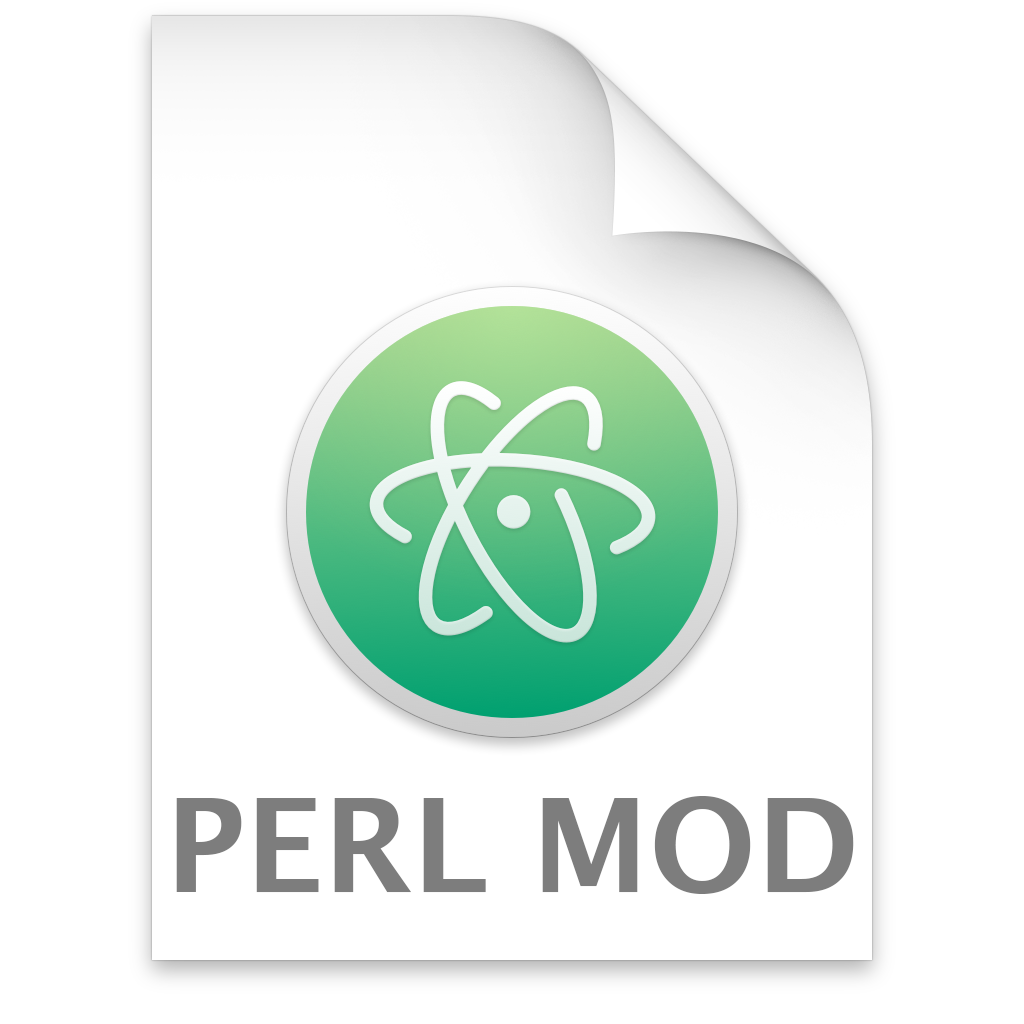
<style>
.page{position:relative;width:1024px;height:1024px;background:#ffffff}
.page>*{position:absolute;margin:0}
.t1{font:130px "LucidaGrande-Bold";color:#7d7d7d}
</style>
<div class="page">
<p class="t1" style="left:176px;top:796px;width:678px;height:98px">PERL MOD</p>
</div>
